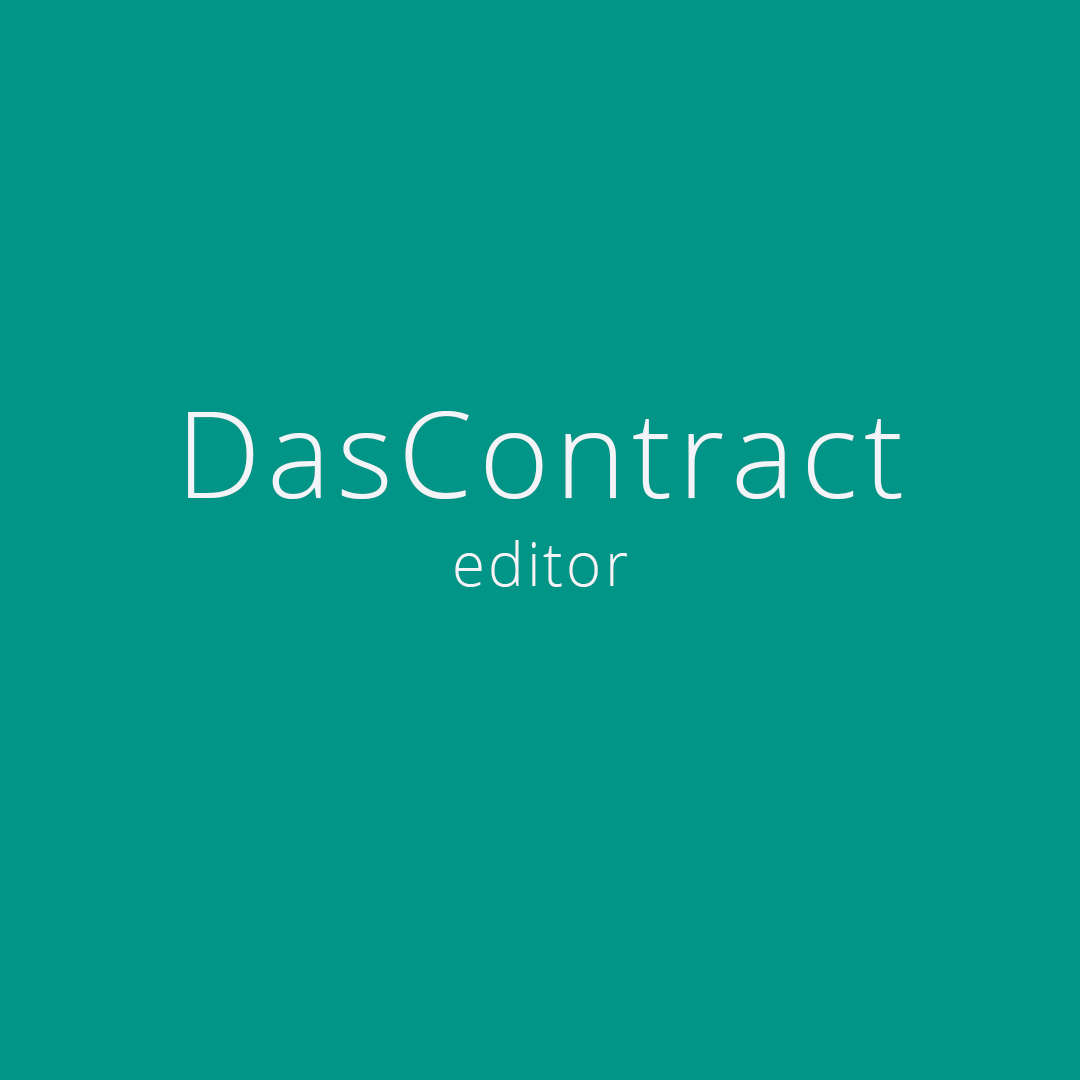
<style>
.page{position:relative;width:1080px;height:1080px;background:#019587}
.page>*{position:absolute;margin:0}
.t1{font:120px "OpenSans-Light";letter-spacing:0.05em;color:#f3f4f8}
.t2{font:60px "OpenSans-Light";letter-spacing:0.05em;color:#f3f4f8}
</style>
<div class="page">
<p class="t1" style="left:188px;top:411px;width:714px;height:88px">DasContract</p>
<p class="t2" style="left:455px;top:540px;width:173px;height:47px">editor</p>
</div>
